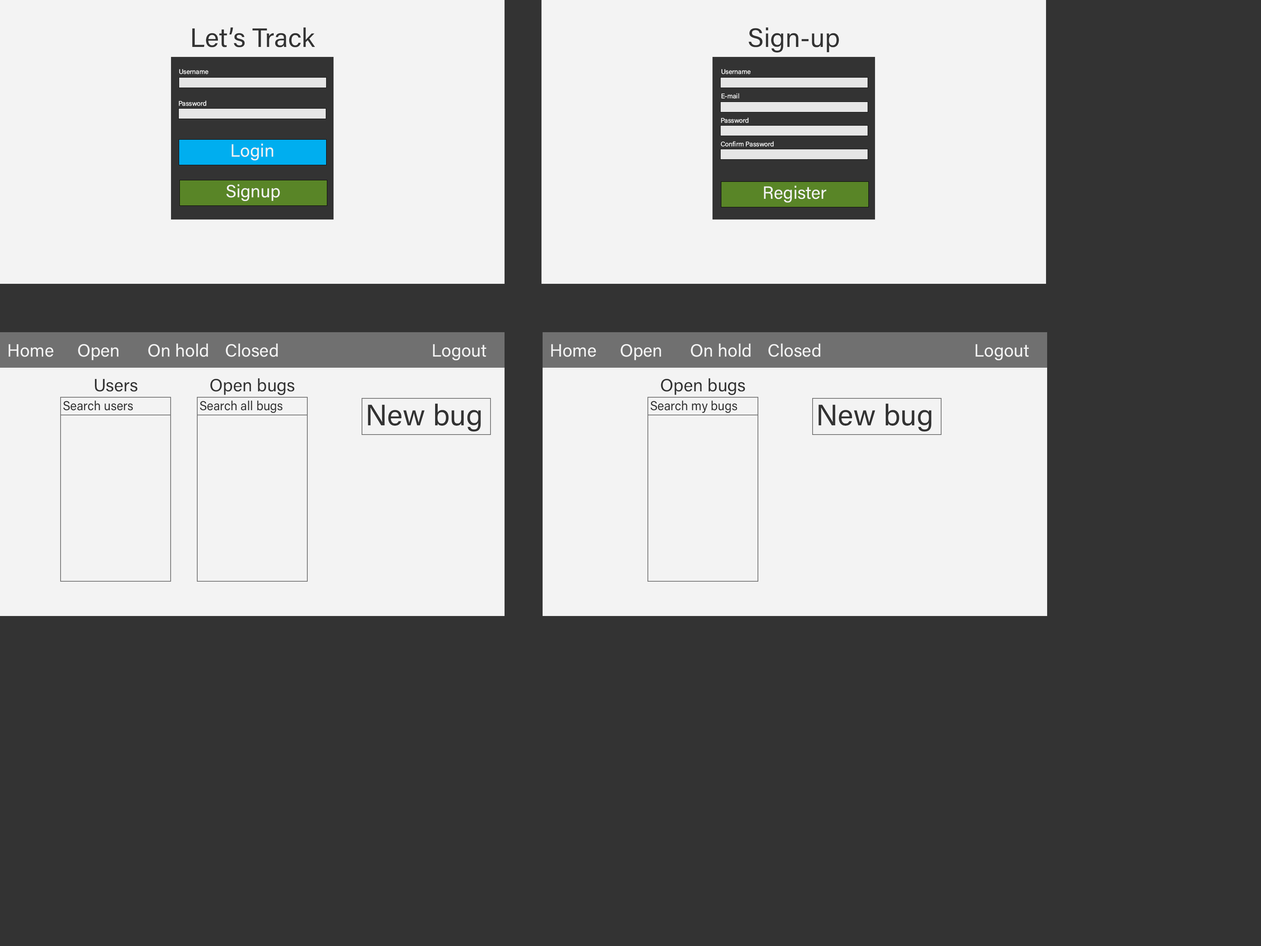
<style>
.page{position:relative;width:1261px;height:946px;background:#333333}
.page>*{position:absolute;margin:0}
.t1{font:26.6px "AcuminConcept-Regular";color:#333333}
.t2{font:6.6px "AcuminConcept-Regular";color:#f3f3f3}
.t3{font:17.7px "AcuminConcept-Regular";color:#f3f3f3}
.t4{font:17.7px "AcuminConcept-Regular";color:#333333}
.t5{font:12.9px "AcuminConcept-Regular";color:#333333;scale:0.96 1}
.t6{font:29.5px "AcuminConcept-Regular";color:#333333}
</style>
<div class="page">
<p class="t1" style="left:192px;top:27px;width:123px;height:20px">Let’s Track</p>
<p class="t1" style="left:749px;top:27px;width:90px;height:25px">Sign-up</p>
<p class="t2" style="left:179px;top:69px;width:29px;height:5px">Username</p>
<p class="t2" style="left:721px;top:69px;width:30px;height:5px">Username</p>
<p class="t2" style="left:179px;top:100px;width:27px;height:6px">Password</p>
<p class="t2" style="left:721px;top:93px;width:18px;height:6px">E-mail</p>
<p class="t2" style="left:721px;top:117px;width:28px;height:6px">Password</p>
<p class="t3" style="left:232px;top:143px;width:41px;height:17px">Login</p>
<p class="t2" style="left:721px;top:141px;width:53px;height:6px">Confirm Password</p>
<p class="t3" style="left:226px;top:184px;width:54px;height:17px">Signup</p>
<p class="t3" style="left:764px;top:185px;width:62px;height:17px">Register</p>
<p class="t3" style="left:8px;top:344px;width:46px;height:13px">Home</p>
<p class="t3" style="left:78px;top:344px;width:41px;height:16px">Open</p>
<p class="t3" style="left:148px;top:343px;width:60px;height:14px">On hold</p>
<p class="t3" style="left:226px;top:343px;width:52px;height:14px">Closed</p>
<p class="t3" style="left:433px;top:344px;width:53px;height:16px">Logout</p>
<p class="t3" style="left:551px;top:344px;width:45px;height:13px">Home</p>
<p class="t3" style="left:621px;top:344px;width:40px;height:16px">Open</p>
<p class="t3" style="left:691px;top:343px;width:60px;height:14px">On hold</p>
<p class="t3" style="left:768px;top:343px;width:52px;height:14px">Closed</p>
<p class="t3" style="left:976px;top:344px;width:53px;height:16px">Logout</p>
<p class="t4" style="left:210px;top:378px;width:84px;height:17px">Open bugs</p>
<p class="t4" style="left:661px;top:378px;width:84px;height:17px">Open bugs</p>
<p class="t4" style="left:95px;top:379px;width:42px;height:13px">Users</p>
<p class="t5" style="left:63px;top:400px;width:70px;height:10px">Search users</p>
<p class="t5" style="left:200px;top:400px;width:83px;height:13px">Search all bugs</p>
<p class="t5" style="left:650px;top:400px;width:87px;height:13px">Search my bugs</p>
<p class="t6" style="left:368px;top:403px;width:113px;height:28px">New bug</p>
<p class="t6" style="left:819px;top:403px;width:113px;height:28px">New bug</p>
</div>
